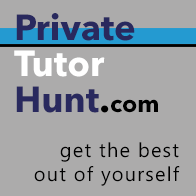
<style>
.page{position:relative;width:196px;height:196px;background:#acabab}
.page>*{position:absolute;margin:0}
.t1{font:36px/36px "AvenirNextLTPro-Bold";color:#29295e}
.t2{font:36px/36px "AvenirNextLTPro-Bold";color:#ffffff}
.t3{font:36px/36px "AvenirNextLTPro-Bold";color:#000000}
.t4{font:24px/36px "AvenirNextLTPro-Bold";color:#000000}
.t5{font:20px "MicrosoftPhagsPa";letter-spacing:0.06em;color:#000000}
</style>
<div class="page">
<p class="t1" style="left:14px;top:13px;width:144px;height:100px">Private<br><span class="t2">Tutor<br></span>Hunt<span class="t3">.</span><span class="t4">com</span></p>
<p class="t5" style="left:34px;top:142px;width:146px;height:44px;text-align:right">get the best<br>out of yourself</p>
</div>
